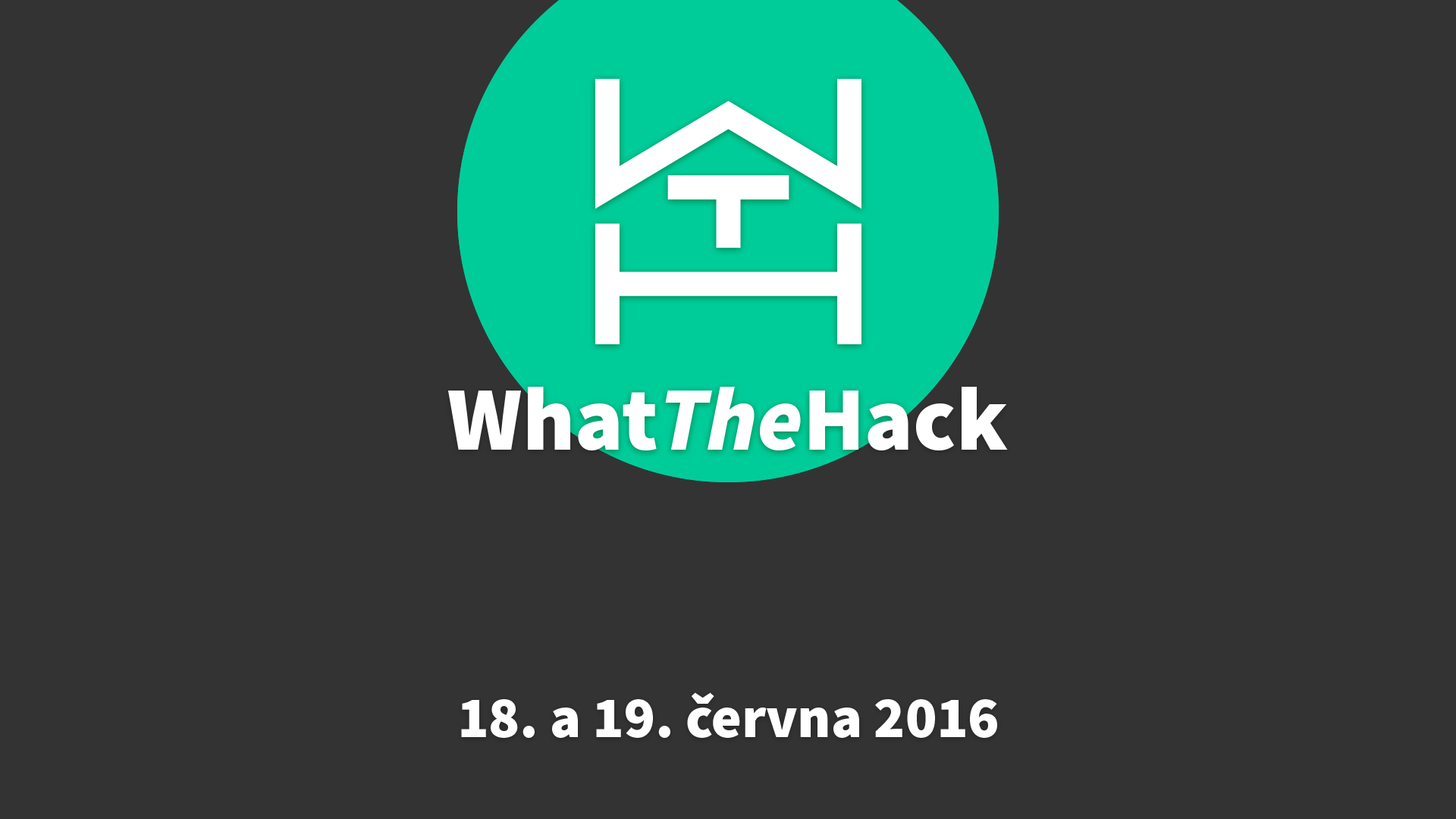
<style>
.page{position:relative;width:1456px;height:819px;background:#333333}
.page>*{position:absolute;margin:0}
.t1{font:90.6px "SourceSansPro-Black";color:#ffffff}
.t2{font:90.6px "SourceSansPro-BlackIt";color:#ffffff}
.t3{font:58px "SourceSansPro-Black";color:#ffffff}
</style>
<div class="page">
<p class="t1" style="left:448px;top:387px;width:560px;height:63px">What<span class="t2">The</span>Hack</p>
<p class="t3" style="left:461px;top:692px;width:536px;height:46px">18. a 19. června 2016</p>
</div>
